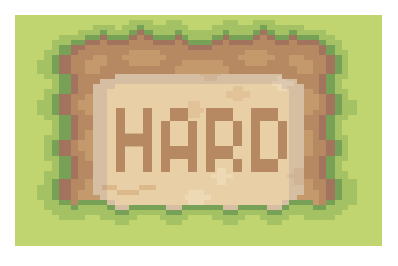
<style>
.page{position:relative;width:398px;height:266px;background:#c0d470}
.page>*{position:absolute;margin:0}
.t1{font:102.1px "04b03";color:#b68962;scale:0.71 1}
</style>
<div class="page">
<p class="t1" style="left:116px;top:108px;width:171px;height:64px">HARD</p>
</div>
